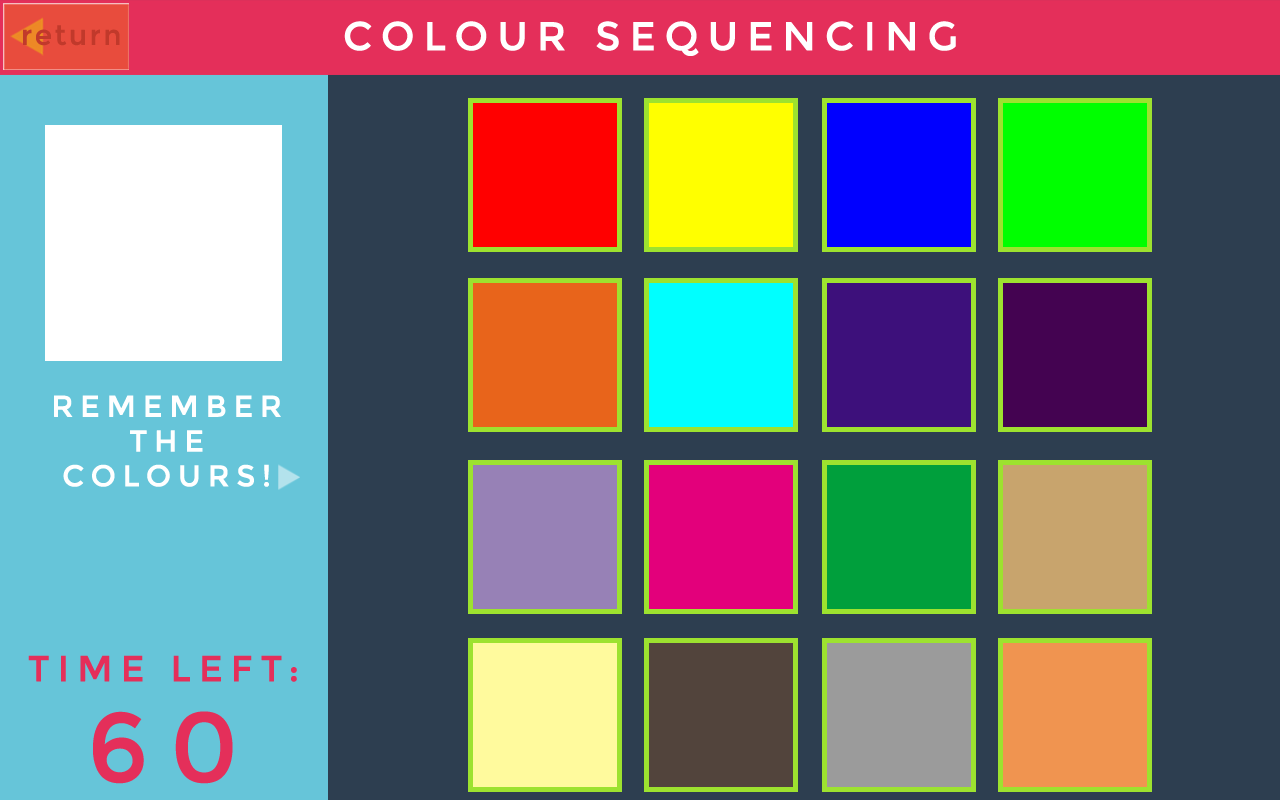
<style>
.page{position:relative;width:1280px;height:800px;background:#2d3e50}
.page>*{position:absolute;margin:0}
.t1{font:27.6px "Montserrat-Regular";letter-spacing:0.075em;color:#c1392b;font-weight:bold}
.t2{font:40px "Montserrat-Regular";letter-spacing:0.2em;color:#ffffff;text-transform:uppercase;font-weight:bold}
.t3{font:30px/34.9px "Montserrat-Regular";letter-spacing:0.2em;color:#ffffff;text-transform:uppercase;font-weight:bold}
.t4{font:36px/44.9px "Montserrat-Regular";letter-spacing:0.2em;color:#e42f5a;text-transform:uppercase;font-weight:bold}
.t5{font:98px/100.9px "Montserrat-Regular";letter-spacing:0.2em;color:#e42f5a;text-transform:uppercase;font-weight:bold}
</style>
<div class="page">
<p class="t1" style="left:23px;top:25px;width:97px;height:21px">return</p>
<p class="t2" style="left:344px;top:21px;width:612px;height:35px">Colour Sequencing</p>
<p class="t3" style="left:54px;top:395px;width:227px;height:92px;text-align:center">remember <br>the <br>colourS!</p>
<p class="t4" style="left:28px;top:655px;width:269px;height:129px;text-align:center">Time Left:<br><span class="t5">60</span></p>
</div>
